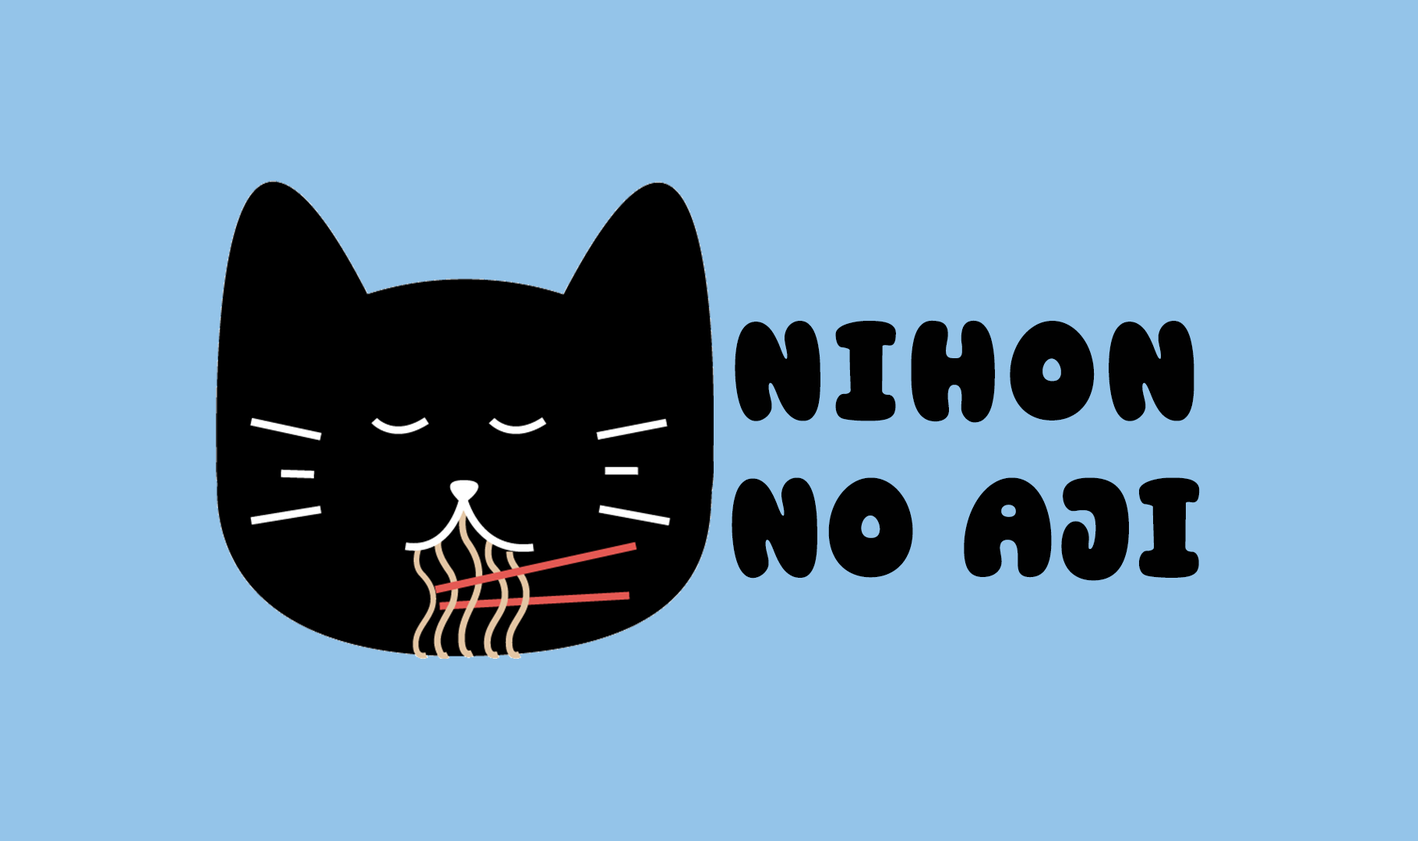
<style>
.page{position:relative;width:1418px;height:841px;background:#94c4e9}
.page>*{position:absolute;margin:0}
.t1{font:143.3px/156.9px "SuperKinds";letter-spacing:0.05em;color:#010101;scale:0.96 1}
.t2{font:143.3px/156.9px "SuperKinds";letter-spacing:0.085em;color:#010101;scale:0.96 1}
</style>
<div class="page">
<p class="t1" style="left:731px;top:320px;width:468px;height:261px;text-align:center"><span class="t2">NIHON<br></span>NO AJI</p>
</div>
